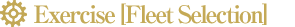
<style>
.page{position:relative;width:295px;height:27px;background:#ffffff}
.page>*{position:absolute;margin:0}
.t1{font:24px "RyuminPro-ExBold";letter-spacing:-0.08em;color:#c4a956}
</style>
<div class="page">
<p class="t1" style="left:34px;top:3px;width:233px;height:22px">Exercise [Fleet Selection]</p>
</div>
